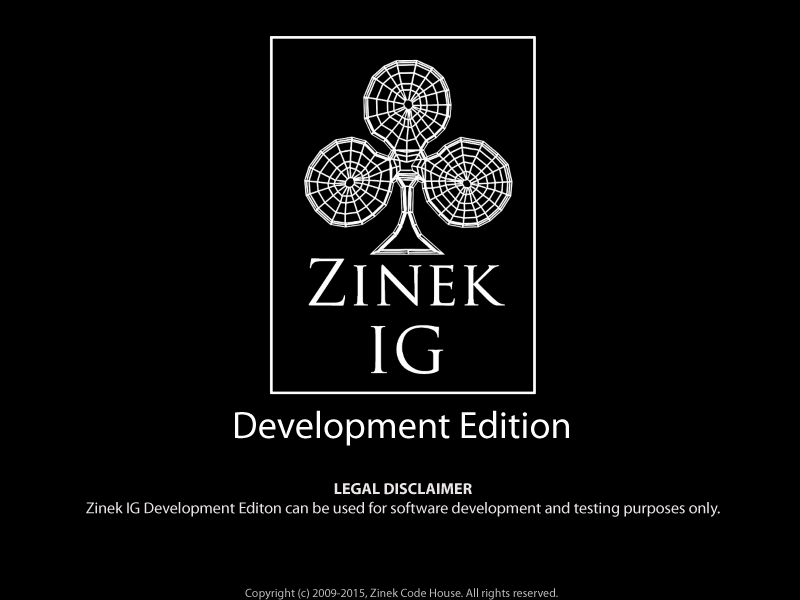
<style>
.page{position:relative;width:800px;height:600px;background:#000000}
.page>*{position:absolute;margin:0}
.t1{font:38.3px "MyriadPro-Regular";color:#fefefe}
.t2{font:16px "MyriadPro-Regular";color:#ebe6e6}
.t3{font:16px "MyriadPro-Bold";color:#ebe6e6}
.t4{font:12px "MyriadPro-Regular";color:#bfbfbf}
</style>
<div class="page">
<p class="t1" style="left:235px;top:410px;width:334px;height:36px">Development Edition</p>
<p class="t2" style="left:86px;top:483px;width:634px;height:34px;text-align:center"><span class="t3">LEGAL DISCLAIMER<br></span>Zinek IG Development Editon can be used for software development and testing purposes only.</p>
<p class="t4" style="left:245px;top:588px;width:313px;height:12px">Copyright (c) 2009-2015, Zinek Code House. All rights reserved.</p>
</div>
